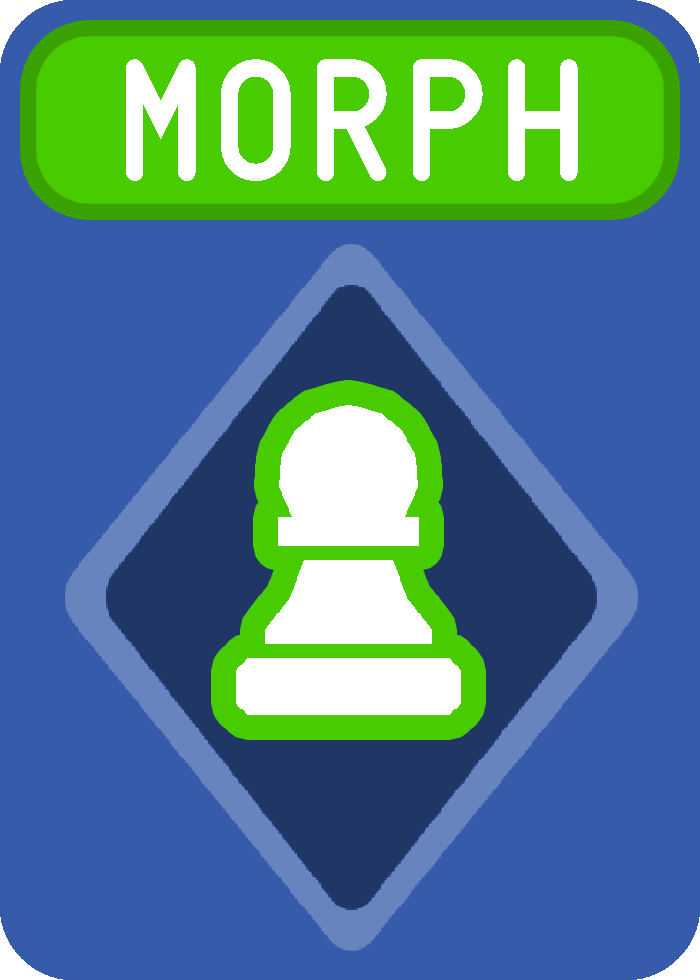
<style>
.page{position:relative;width:700px;height:980px;background:#355baa}
.page>*{position:absolute;margin:0}
.t1{font:177.8px "CQMono";letter-spacing:0.05em;color:#ffffff}
</style>
<div class="page">
<p class="t1" style="left:126px;top:59px;width:452px;height:122px">MORPH</p>
</div>
